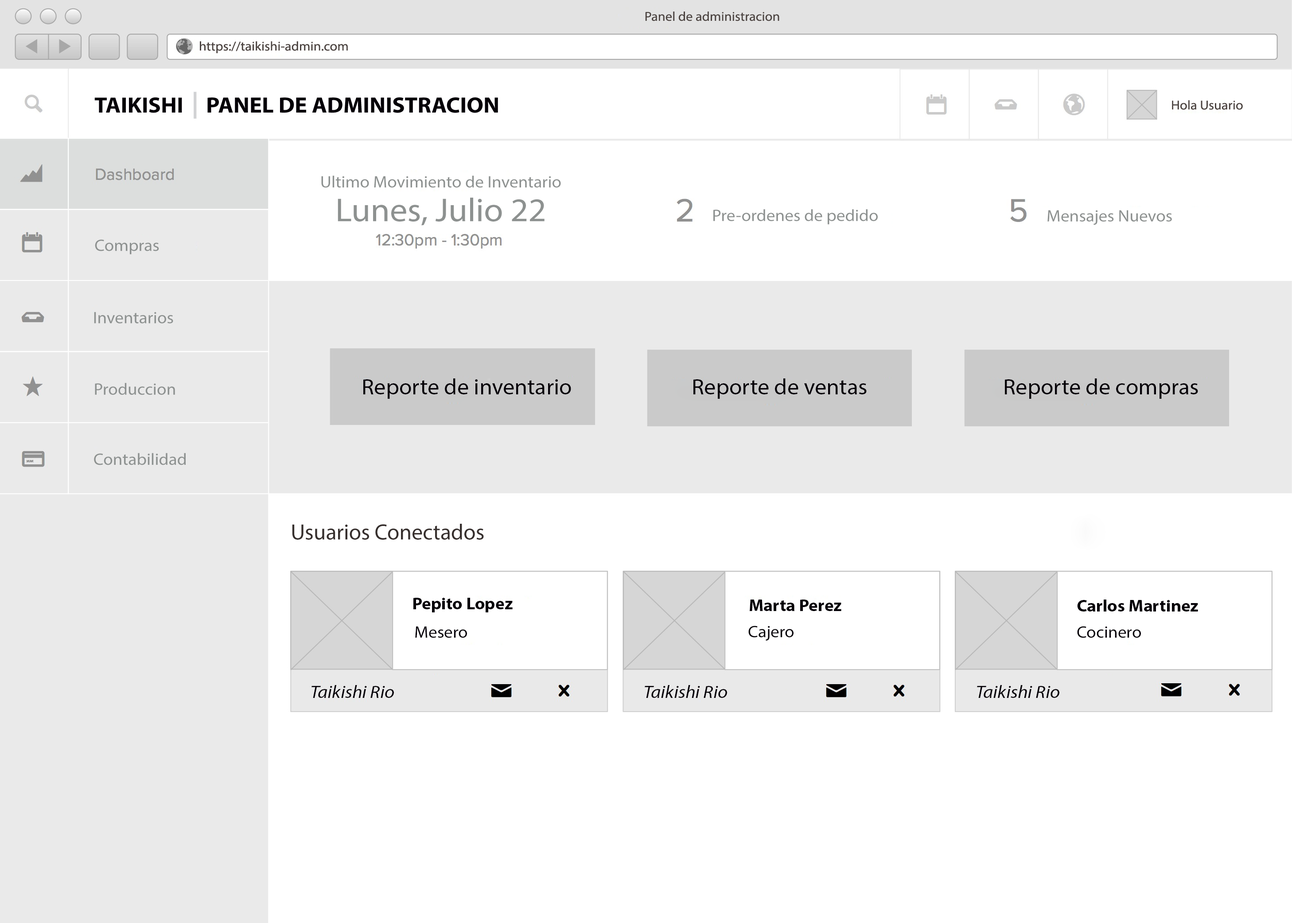
<style>
.page{position:relative;width:1292px;height:923px;background:#ffffff}
.page>*{position:absolute;margin:0}
.t1{font:12.9px "MyriadPro-Regular";color:#4b4340;scale:1.05 1}
.t2{font:22.2px "MyriadPro-Bold";color:#040007;scale:1.05 1}
.t3{font:16.6px "MyriadPro-Regular";color:#8d9190;scale:1.05 1}
.t4{font:33.2px "MyriadPro-Regular";color:#8d9190;scale:1.05 1}
.t5{font:22.2px "MyriadPro-Regular";color:#040007;scale:1.05 1}
.t6{font:22.2px "MyriadPro-Regular";color:#362f2d}
.t7{font:16.6px "MyriadPro-Bold";color:#040007;scale:1.05 1}
.t8{font:16.6px "MyriadPro-Regular";color:#040007;scale:1.05 1}
.t9{font:17.5px "MyriadPro-It";color:#040007;scale:1.08 1}
</style>
<div class="page">
<p class="t1" style="left:645px;top:12px;width:134px;height:9px">Panel de administracion</p>
<p class="t2" style="left:94px;top:97px;width:88px;height:16px">TAIKISHI</p>
<p class="t3" style="left:321px;top:175px;width:240px;height:13px">Ultimo Movimiento de Inventario</p>
<p class="t4" style="left:338px;top:198px;width:207px;height:28px">Lunes, Julio 22</p>
<p class="t3" style="left:713px;top:209px;width:165px;height:16px">Pre-ordenes de pedido</p>
<p class="t3" style="left:1047px;top:210px;width:125px;height:15px">Mensajes Nuevos</p>
<p class="t3" style="left:95px;top:239px;width:64px;height:15px">Compras</p>
<p class="t3" style="left:94px;top:312px;width:79px;height:11px">Inventarios</p>
<p class="t3" style="left:95px;top:383px;width:80px;height:12px">Produccion</p>
<p class="t5" style="left:363px;top:378px;width:208px;height:21px">Reporte de inventario</p>
<p class="t5" style="left:693px;top:378px;width:174px;height:21px">Reporte de ventas</p>
<p class="t5" style="left:1005px;top:378px;width:193px;height:21px">Reporte de compras</p>
<p class="t3" style="left:94px;top:453px;width:92px;height:12px">Contabilidad</p>
<p class="t6" style="left:292px;top:524px;width:192px;height:16px">Usuarios Conectados</p>
<p class="t7" style="left:413px;top:598px;width:100px;height:14px">Pepito Lopez</p>
<p class="t7" style="left:750px;top:599px;width:91px;height:12px">Marta Perez</p>
<p class="t7" style="left:1077px;top:599px;width:121px;height:12px">Carlos Martinez</p>
<p class="t8" style="left:415px;top:626px;width:52px;height:12px">Mesero</p>
<p class="t8" style="left:748px;top:626px;width:46px;height:15px">Cajero</p>
<p class="t8" style="left:1077px;top:626px;width:64px;height:12px">Cocinero</p>
<p class="t9" style="left:311px;top:685px;width:83px;height:13px">Taikishi Rio</p>
<p class="t9" style="left:645px;top:685px;width:82px;height:13px">Taikishi Rio</p>
<p class="t9" style="left:977px;top:685px;width:82px;height:13px">Taikishi Rio</p>
</div>
